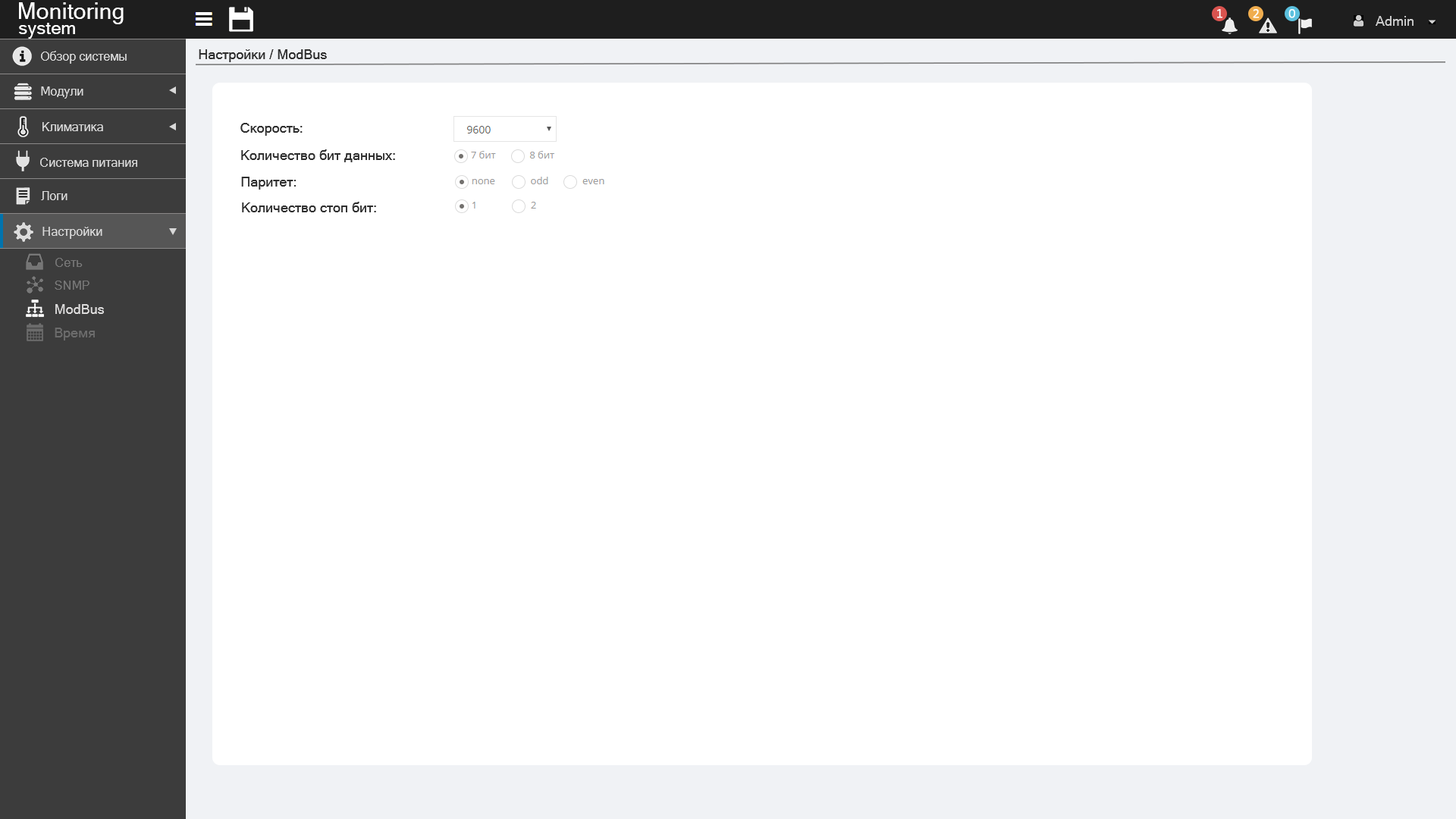
<style>
.page{position:relative;width:1456px;height:819px;background:#ffffff}
.page>*{position:absolute;margin:0}
.t1{font:22.7px "MicrosoftSansSerif";color:#ffffff}
.t2{font:18.2px "MicrosoftSansSerif";color:#ffffff}
.t3{font:12.1px "MicrosoftSansSerif";color:#d9d9d9}
.t4{font:13.6px "MicrosoftSansSerif";color:#2f2f2f}
.t5{font:12.1px "MicrosoftSansSerif";color:#777777}
.t6{font:13.6px "MicrosoftSansSerif";color:#dcdbdb}
.t7{font:13.6px "MicrosoftSansSerif";color:#6c6c6c}
</style>
<div class="page">
<p class="t1" style="left:19px;top:2px;width:105px;height:22px">Monitoring</p>
<p class="t2" style="left:19px;top:23px;width:56px;height:16px">system</p>
<p class="t3" style="left:41px;top:51px;width:86px;height:13px">Обзор системы</p>
<p class="t4" style="left:199px;top:49px;width:128px;height:13px">Настройки / ModBus</p>
<p class="t3" style="left:41px;top:86px;width:42px;height:13px">Модули</p>
<p class="t3" style="left:42px;top:122px;width:61px;height:9px">Климатика</p>
<p class="t4" style="left:240px;top:123px;width:63px;height:13px">Скорость:</p>
<p class="t4" style="left:241px;top:149px;width:154px;height:13px">Количество бит данных:</p>
<p class="t3" style="left:40px;top:158px;width:97px;height:9px">Система питания</p>
<p class="t4" style="left:241px;top:177px;width:55px;height:13px">Паритет:</p>
<p class="t3" style="left:41px;top:191px;width:26px;height:9px">Логи</p>
<p class="t4" style="left:242px;top:202px;width:134px;height:10px">Количество стоп бит:</p>
<p class="t3" style="left:42px;top:227px;width:60px;height:12px">Настройки</p>
<p class="t5" style="left:55px;top:258px;width:28px;height:9px">Сеть</p>
<p class="t5" style="left:55px;top:281px;width:34px;height:9px">SNMP</p>
<p class="t6" style="left:55px;top:304px;width:49px;height:10px">ModBus</p>
<p class="t7" style="left:55px;top:328px;width:40px;height:12px">Время</p>
</div>
